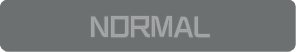
<style>
.page{position:relative;width:296px;height:52px;background:#6c7070}
.page>*{position:absolute;margin:0}
.t1{font:24px "KafuTechnoStd-HV";color:#a0a2a2;scale:0.92 1}
</style>
<div class="page">
<p class="t1" style="left:91px;top:16px;width:119px;height:22px">NORMAL</p>
</div>
